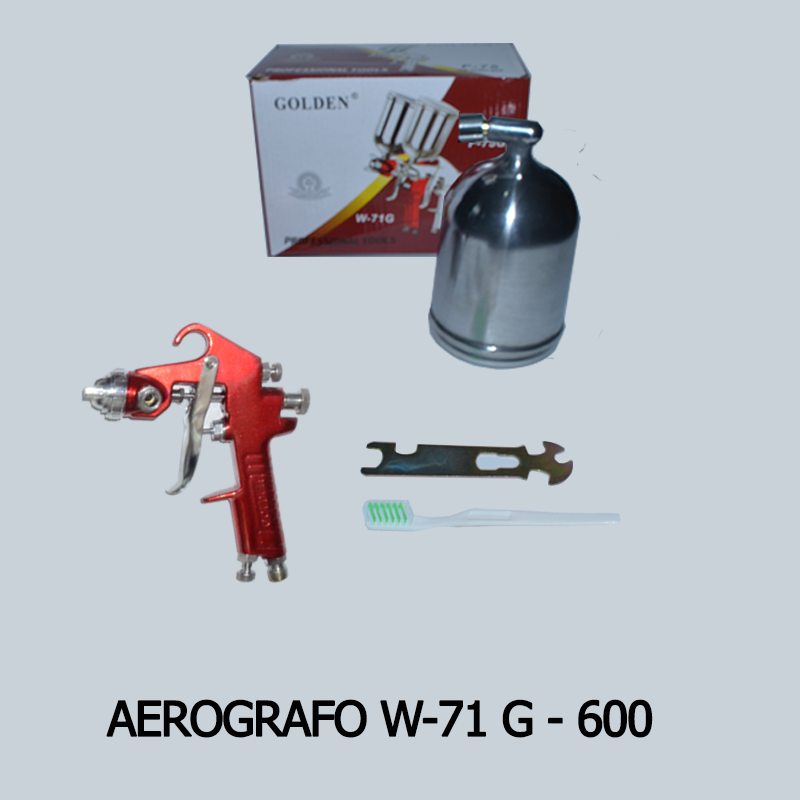
<style>
.page{position:relative;width:800px;height:800px;background:#c9d2d8}
.page>*{position:absolute;margin:0}
.t1{font:48px "Tahoma";letter-spacing:-0.05em;color:#020202;font-weight:bold}
</style>
<div class="page">
<p class="t1" style="left:106px;top:699px;width:547px;height:39px">AEROGRAFO W-71 G - 600</p>
</div>
